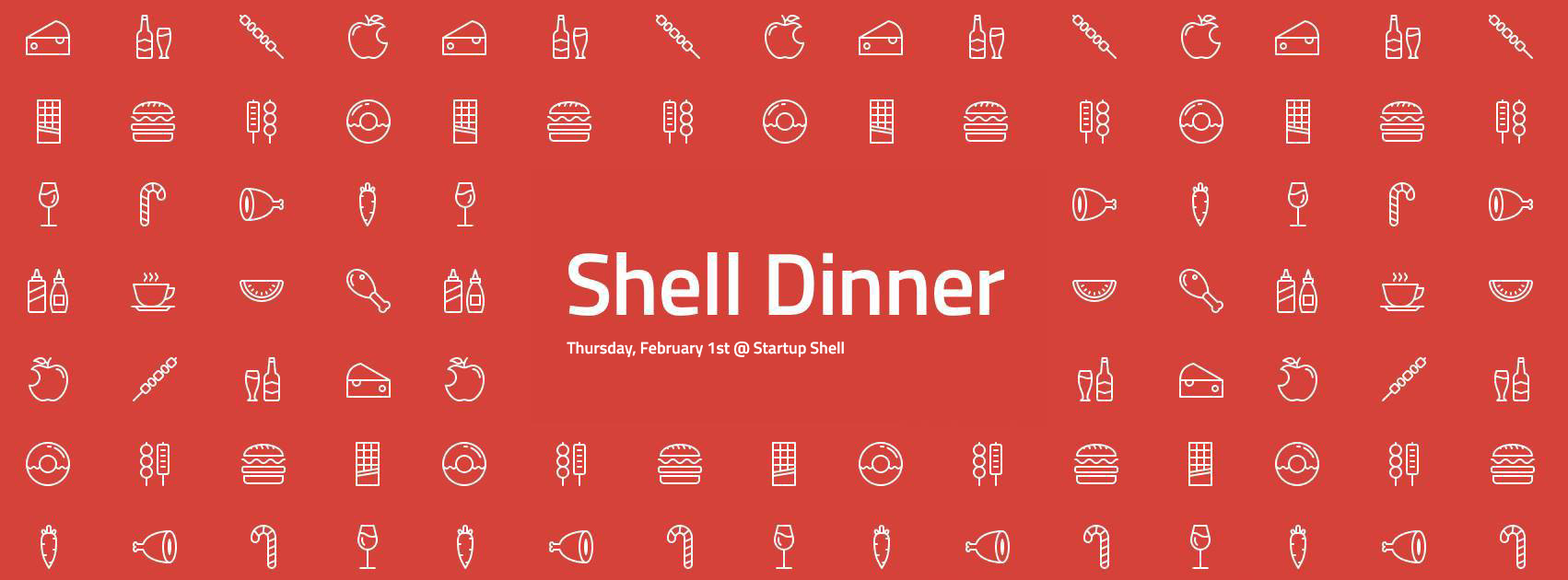
<style>
.page{position:relative;width:1568px;height:580px;background:#d5423a}
.page>*{position:absolute;margin:0}
.t1{font:16.6px "TitilliumWeb-SemiBold";color:#ffffff}
</style>
<div class="page">
<p class="t1" style="left:567px;top:341px;width:277px;height:16px">Thursday, February 1st @ Startup Shell</p>
</div>
